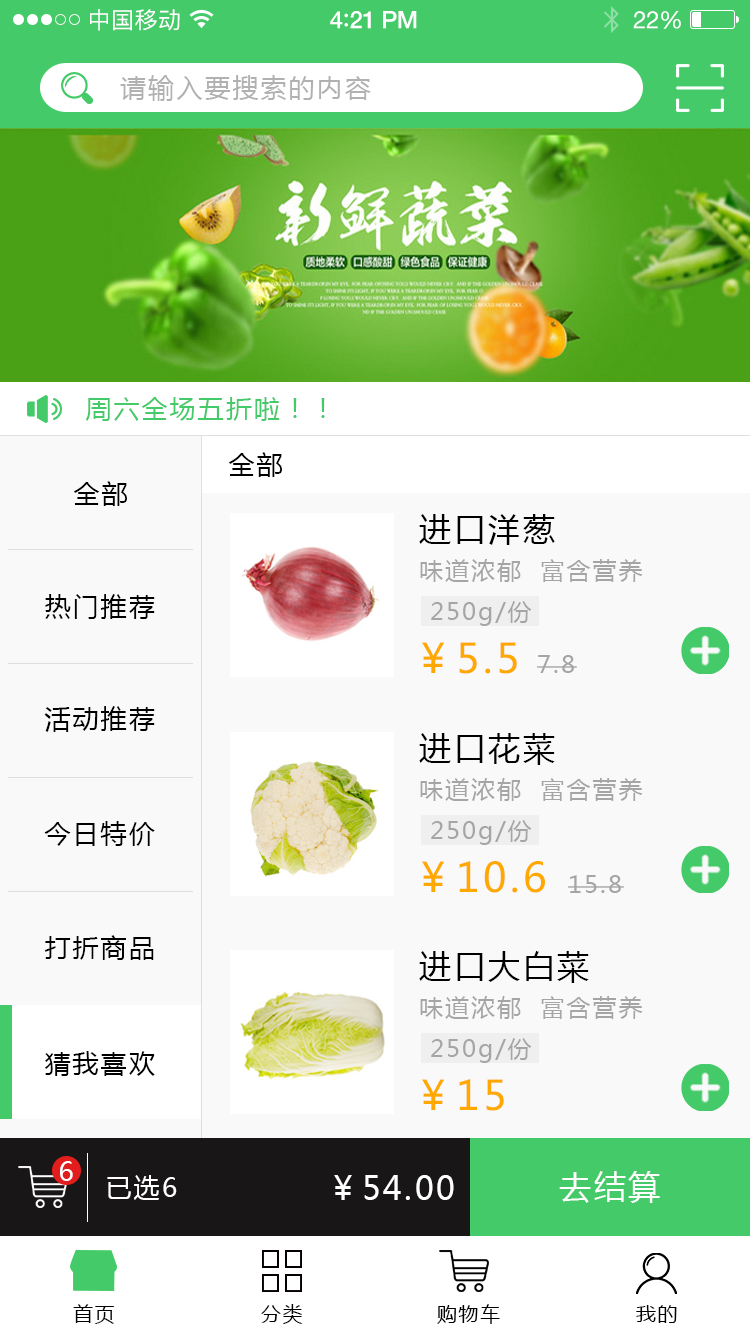
<style>
.page{position:relative;width:750px;height:1334px;background:#f9f9f9}
.page>*{position:absolute;margin:0}
.t1{font:23px "PingFangSC-Regular";letter-spacing:0.02em;color:#ffffff}
.t2{font:24px "HelveticaNeue-Medium";letter-spacing:-0.02em;color:#ffffff}
.t3{font:26px "Avenir-Medium";letter-spacing:-0.02em;color:#ffffff}
.t4{font:24px "HelveticaNeue";letter-spacing:-0.02em;color:#ffffff}
.t5{font:26px "MicrosoftYaHei";letter-spacing:0.08em;color:#b1b1b1;text-transform:uppercase}
.t6{font:26px "MicrosoftYaHei";letter-spacing:0.08em;color:#44ca68;text-transform:uppercase}
.t7{font:26px "MicrosoftYaHei";letter-spacing:0.08em;color:#000000;text-transform:uppercase}
.t8{font:32px "MicrosoftYaHei";letter-spacing:0.08em;color:#000000;text-transform:uppercase}
.t9{font:24px "MicrosoftYaHei";letter-spacing:0.08em;color:#a5a5a5;text-transform:uppercase}
.t10{font:24px "MicrosoftYaHei";letter-spacing:0.08em;color:#a5a5a5}
.t11{font:40.4px "MicrosoftYaHei";letter-spacing:0.08em;color:#ffa800;text-transform:uppercase}
.t12{font:26px "MicrosoftYaHei";letter-spacing:0.08em;color:#ffffff;text-transform:uppercase}
.t13{font:32px "MicrosoftYaHei";letter-spacing:0.08em;color:#ffffff;text-transform:uppercase}
.t14{font:20px "MicrosoftYaHei";letter-spacing:0.08em;color:#000000;text-transform:uppercase}
</style>
<div class="page">
<p class="t1" style="left:90px;top:9px;width:90px;height:22px">中国移动</p>
<p class="t2" style="left:330px;top:11px;width:87px;height:18px">4<span class="t3">:</span>21 PM</p>
<p class="t4" style="left:633px;top:11px;width:48px;height:18px">22%</p>
<p class="t5" style="left:120px;top:75px;width:251px;height:26px">请输入要搜索的内容</p>
<p class="t6" style="left:85px;top:397px;width:240px;height:24px">周六全场五折啦！！</p>
<p class="t7" style="left:228px;top:452px;width:54px;height:25px">全部</p>
<p class="t7" style="left:73px;top:481px;width:54px;height:25px">全部</p>
<p class="t8" style="left:419px;top:514px;width:136px;height:31px">进口洋葱</p>
<p class="t9" style="left:420px;top:559px;width:223px;height:23px">味道浓郁  富含营养</p>
<p class="t7" style="left:45px;top:594px;width:110px;height:25px">热门推荐</p>
<p class="t10" style="left:431px;top:601px;width:101px;height:25px">250g/份</p>
<p class="t11" style="left:422px;top:642px;width:95px;height:32px">￥5.5</p>
<p class="t10" style="left:537px;top:655px;width:40px;height:18px">7.8</p>
<p class="t7" style="left:44px;top:706px;width:111px;height:26px">活动推荐</p>
<p class="t8" style="left:419px;top:733px;width:136px;height:32px">进口花菜</p>
<p class="t9" style="left:420px;top:778px;width:223px;height:23px">味道浓郁  富含营养</p>
<p class="t7" style="left:44px;top:821px;width:111px;height:25px">今日特价</p>
<p class="t10" style="left:431px;top:820px;width:101px;height:25px">250g/份</p>
<p class="t11" style="left:422px;top:861px;width:123px;height:32px">￥10.6</p>
<p class="t10" style="left:568px;top:875px;width:56px;height:18px">15.8</p>
<p class="t7" style="left:44px;top:935px;width:110px;height:25px">打折商品</p>
<p class="t8" style="left:419px;top:951px;width:170px;height:32px">进口大白菜</p>
<p class="t9" style="left:420px;top:996px;width:223px;height:23px">味道浓郁  富含营养</p>
<p class="t10" style="left:431px;top:1038px;width:101px;height:25px">250g/份</p>
<p class="t7" style="left:45px;top:1051px;width:110px;height:25px">猜我喜欢</p>
<p class="t11" style="left:422px;top:1079px;width:82px;height:32px">￥15</p>
<p class="t12" style="left:60px;top:1161px;width:13px;height:20px">6</p>
<p class="t12" style="left:107px;top:1175px;width:70px;height:25px">已选6</p>
<p class="t13" style="left:334px;top:1175px;width:120px;height:25px">￥54.00</p>
<p class="t13" style="left:559px;top:1171px;width:101px;height:32px">去结算</p>
<p class="t14" style="left:73px;top:1304px;width:41px;height:20px">首页</p>
<p class="t14" style="left:261px;top:1304px;width:42px;height:20px">分类</p>
<p class="t14" style="left:437px;top:1304px;width:63px;height:20px">购物车</p>
<p class="t14" style="left:636px;top:1305px;width:41px;height:18px">我的</p>
</div>
